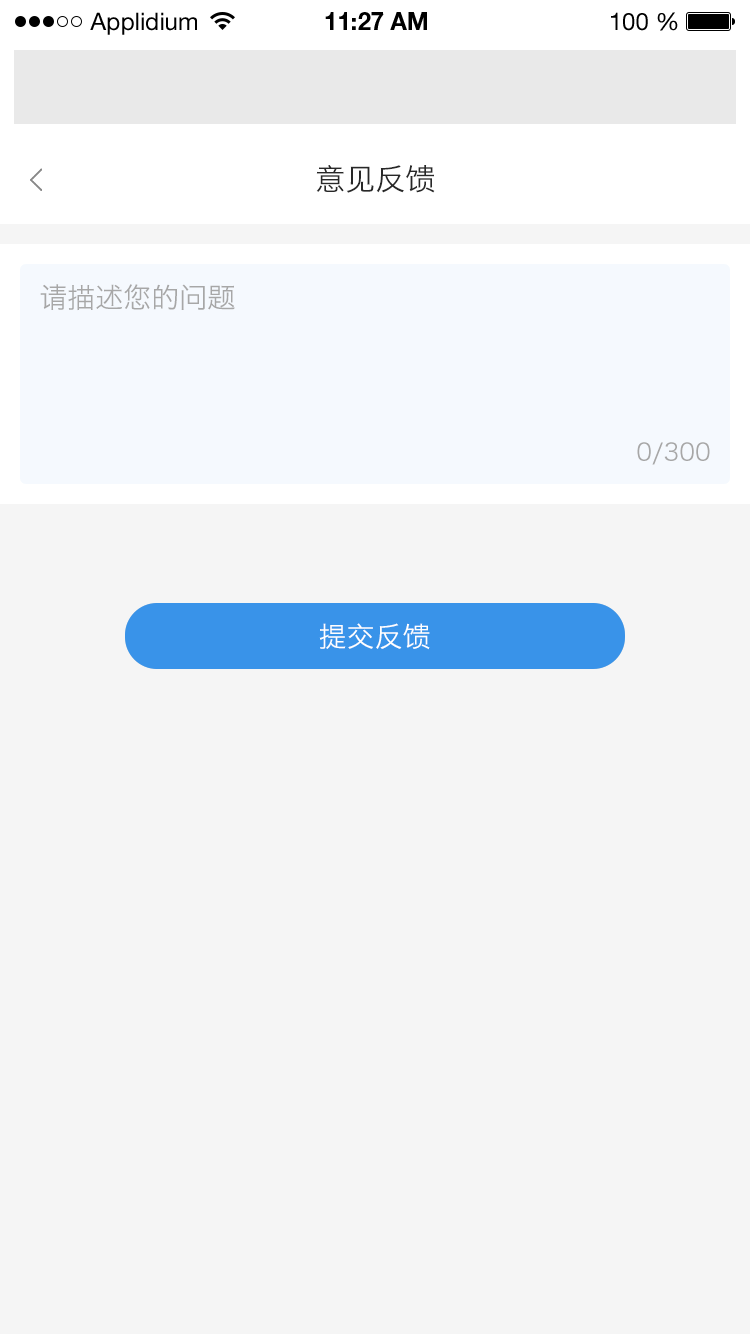
<style>
.page{position:relative;width:750px;height:1334px;background:#f5f5f5}
.page>*{position:absolute;margin:0}
.t1{font:24px "HelveticaNeueLTStd-Roman";color:#000000}
.t2{font:24px "HelveticaNeueLTStd-Bd";color:#000000}
.t3{font:30px "HiraginoSansGB-W3";color:#282828}
.t4{font:28px "HiraginoSansGB-W3";color:#a7a7a7}
.t5{font:24px "HiraginoSansGB-W3";color:#a7a7a7}
.t6{font:28px "HiraginoSansGB-W3";color:#ffffff}
</style>
<div class="page">
<p class="t1" style="left:90px;top:12px;width:107px;height:23px">Applidium</p>
<p class="t2" style="left:325px;top:12px;width:102px;height:18px">11:27 AM</p>
<p class="t1" style="left:611px;top:12px;width:67px;height:19px">100 %</p>
<p class="t3" style="left:316px;top:165px;width:119px;height:28px">意见反馈</p>
<p class="t4" style="left:40px;top:284px;width:195px;height:27px">请描述您的问题</p>
<p class="t5" style="left:637px;top:442px;width:73px;height:23px">0/300</p>
<p class="t6" style="left:319px;top:623px;width:111px;height:27px">提交反馈</p>
</div>
